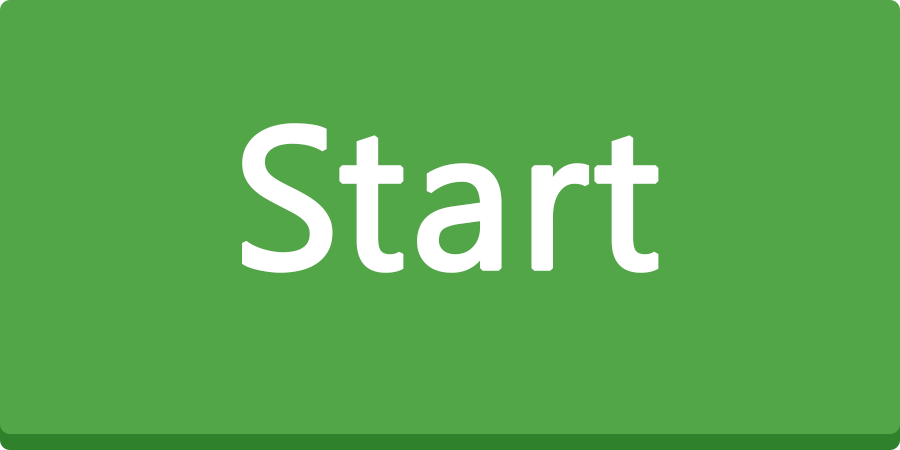
<style>
.page{position:relative;width:900px;height:450px;background:#52a647}
.page>*{position:absolute;margin:0}
.t1{font:200px "SegoeUI";color:#ffffff;font-weight:bold}
</style>
<div class="page">
<p class="t1" style="left:242px;top:123px;width:417px;height:150px">Start</p>
</div>
